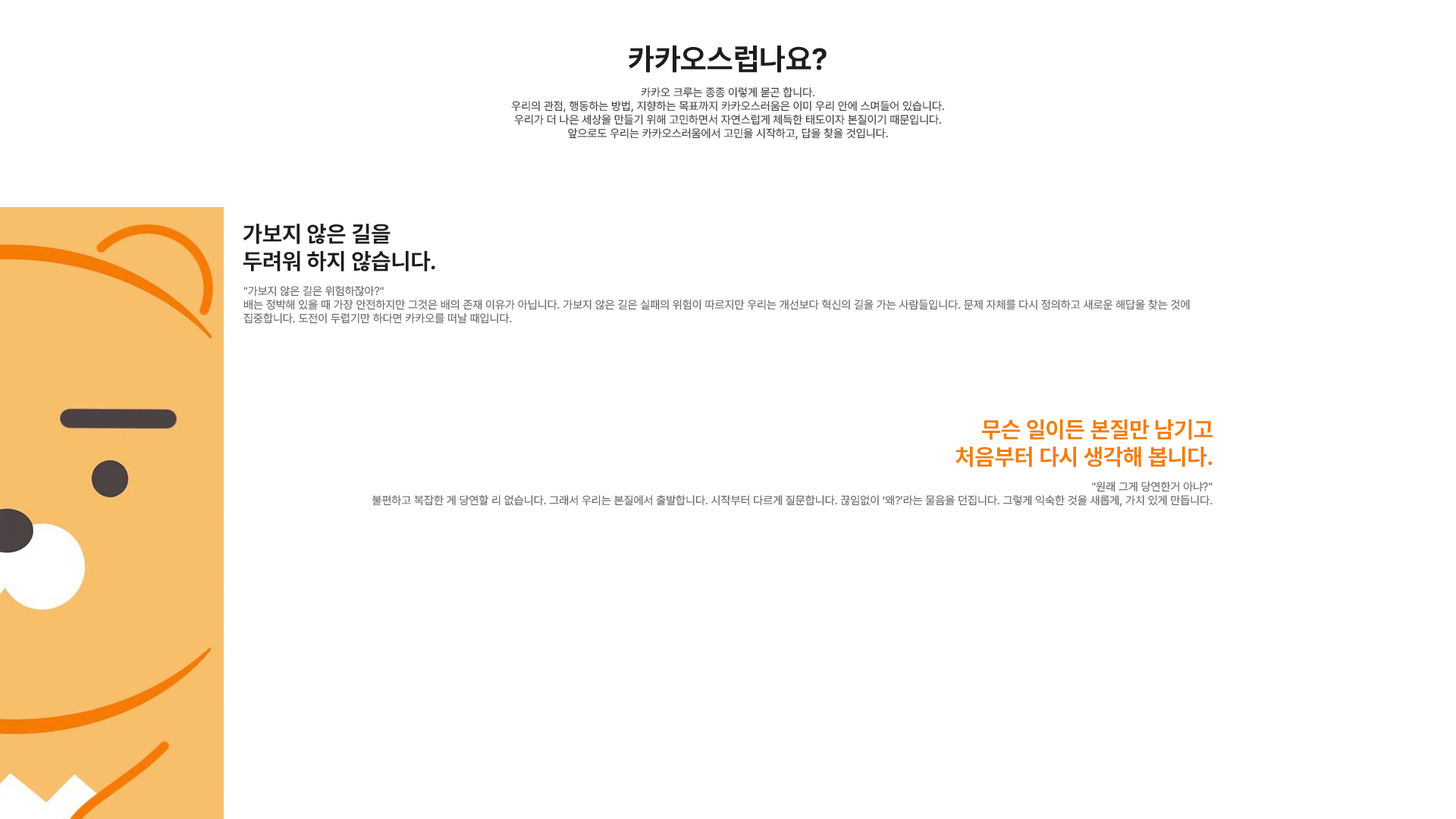
<style>
.page{position:relative;width:1456px;height:819px;background:#ffffff}
.page>*{position:absolute;margin:0}
.t1{font:30.3px "PretendardVariable-Bold";color:#1d1d1d}
.t2{font:11.4px "PretendardVariable-Regular";color:#3d3d3d}
.t3{font:22.7px "PretendardVariable-Bold";color:#1d1d1d}
.t4{font:11.4px "PretendardVariable-Regular";color:#666666}
.t5{font:22.7px "PretendardVariable-Bold";color:#f17e00}
</style>
<div class="page">
<p class="t1" style="left:629px;top:45px;width:198px;height:28px">카카오스럽나요?</p>
<p class="t2" style="left:511px;top:86px;width:433px;height:54px;text-align:center">카카오 크루는 종종 이렇게 묻곤 합니다.<br>우리의 관점, 행동하는 방법, 지향하는 목표까지 카카오스러움은 이미 우리 안에 스며들어 있습니다.<br>우리가 더 나은 세상을 만들기 위해 고민하면서 자연스럽게 체득한 태도이자 본질이기 때문입니다.<br>앞으로도 우리는 카카오스러움에서 고민을 시작하고, 답을 찾을 것입니다.</p>
<p class="t3" style="left:243px;top:224px;width:192px;height:47px">가보지 않은 길을<br>두려워 하지 않습니다.</p>
<p class="t4" style="left:243px;top:285px;width:947px;height:39px">"가보지 않은 길은 위험하잖아?"<br>배는 정박해 있을 때 가장 안전하지만 그것은 배의 존재 이유가 아닙니다. 가보지 않은 길은 실패의 위험이 따르지만 우리는 개선보다 혁신의 길을 가는 사람들입니다. 문제 자체를 다시 정의하고 새로운 해답을 찾는 것에 집중합니다. 도전이 두렵기만 하다면 카카오를 떠날 때입니다.</p>
<p class="t5" style="left:955px;top:419px;width:258px;height:48px;text-align:right">무슨 일이든 본질만 남기고<br>처음부터 다시 생각해 봅니다.</p>
<p class="t4" style="left:372px;top:482px;width:841px;height:25px;text-align:right">"원래 그게 당연한거 아냐?"<br>불편하고 복잡한 게 당연할 리 없습니다. 그래서 우리는 본질에서 출발합니다. 시작부터 다르게 질문합니다. 끊임없이 ‘왜?’라는 물음을 던집니다. 그렇게 익숙한 것을 새롭게, 가치 있게 만듭니다.</p>
</div>
